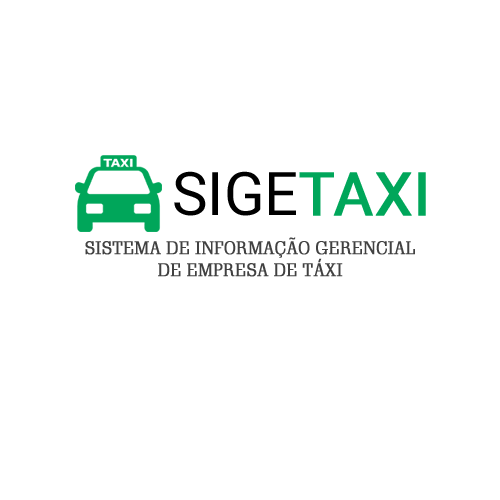
<style>
.page{position:relative;width:500px;height:500px;background:#ffffff}
.page>*{position:absolute;margin:0}
.t1{font:60px "Roboto-Regular";color:#000000;text-transform:uppercase}
.t2{font:60px "Roboto-Regular";color:#00a65a;text-transform:uppercase;font-weight:bold}
.t3{font:18px "SchadowBT-Roman";color:#414141;text-transform:uppercase;font-weight:bold}
</style>
<div class="page">
<p class="t1" style="left:174px;top:171px;width:252px;height:45px">Sige<span class="t2">Taxi</span></p>
<p class="t3" style="left:85px;top:237px;width:330px;height:40px;text-align:center">Sistema de informação gerencial<br>de empresa de táxi</p>
</div>
